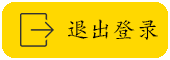
<style>
.page{position:relative;width:170px;height:60px;background:#ffd800}
.page>*{position:absolute;margin:0}
.t1{font:23.3px "¿¬Ìå";color:#000000}
</style>
<div class="page">
<p class="t1" style="left:68px;top:19px;width:90px;height:21px">退出登录</p>
</div>
